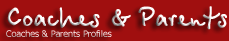
<style>
.page{position:relative;width:229px;height:41px;background:#a00f0f}
.page>*{position:absolute;margin:0}
.t1{font:9px "Tahoma"}
.t2{font:30px "BetinaScriptBold"}
</style>
<div class="page">
<p class="t1" style="left:6px;top:6px;width:221px;height:31px"><span class="t2">Coaches &amp; Parents<br></span>Coaches &amp; Parents Profiles</p>
</div>
